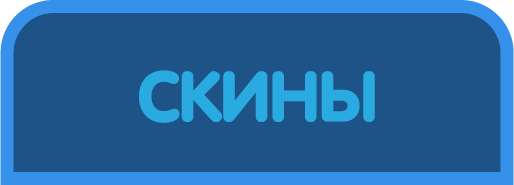
<style>
.page{position:relative;width:514px;height:185px;background:#1e5387}
.page>*{position:absolute;margin:0}
.t1{font:70px "VAGWorld-Bold";color:#29abe2}
</style>
<div class="page">
<p class="t1" style="left:139px;top:70px;width:236px;height:53px">СКИНЫ</p>
</div>
